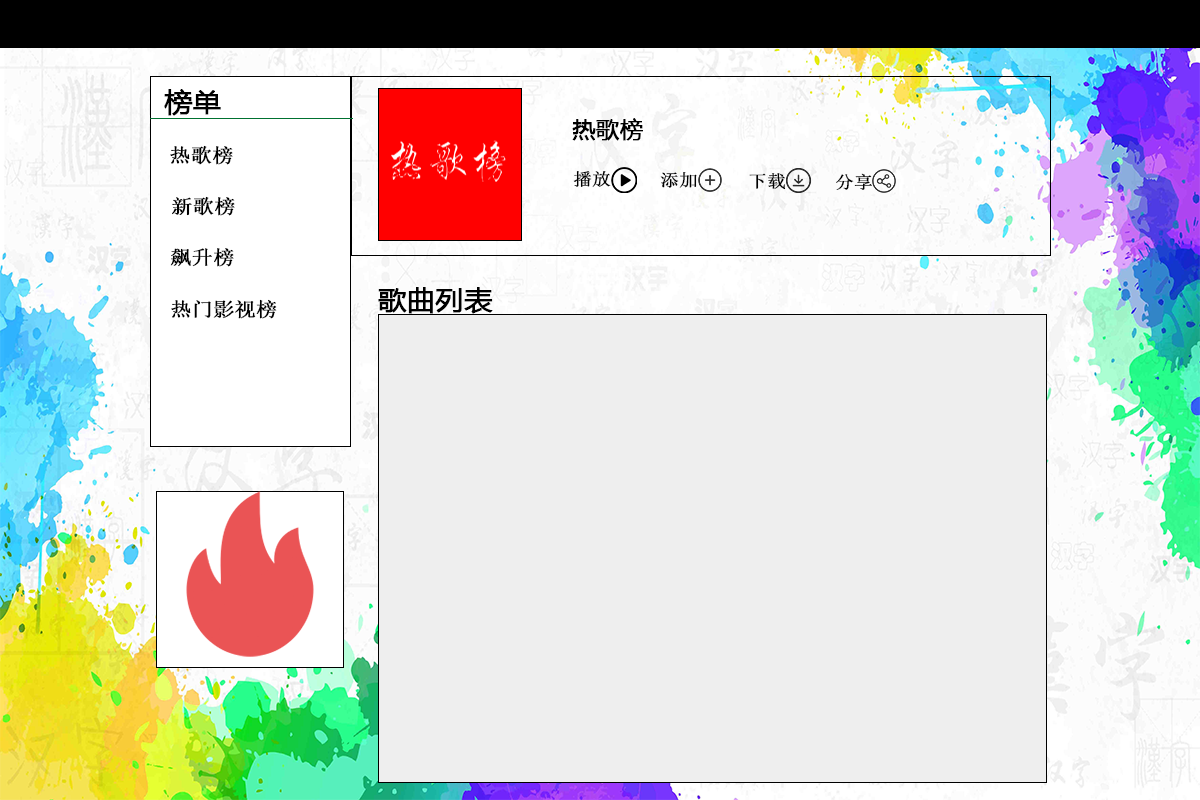
<style>
.page{position:relative;width:1200px;height:800px;background:#eeeeee}
.page>*{position:absolute;margin:0}
.t1{font:25.9px "MicrosoftYaHei";color:#000000;font-weight:bold;scale:1.07 1}
.t2{font:21.6px "MicrosoftYaHei";color:#000000;font-weight:bold;scale:1.07 1}
.t3{font:19.4px "SimSun";color:#000000;font-weight:bold;scale:1.07 1}
.t4{font:17.3px "SimSun";color:#000000;font-weight:bold;scale:1.07 1}
</style>
<div class="page">
<p class="t1" style="left:164px;top:89px;width:57px;height:27px">榜单</p>
<p class="t2" style="left:572px;top:118px;width:71px;height:23px">热歌榜</p>
<p class="t3" style="left:170px;top:145px;width:63px;height:20px">热歌榜</p>
<p class="t4" style="left:573px;top:171px;width:38px;height:16px">播放</p>
<p class="t4" style="left:660px;top:172px;width:37px;height:16px">添加</p>
<p class="t4" style="left:749px;top:173px;width:37px;height:17px">下载</p>
<p class="t4" style="left:836px;top:173px;width:36px;height:17px">分享</p>
<p class="t3" style="left:172px;top:196px;width:63px;height:20px">新歌榜</p>
<p class="t3" style="left:170px;top:248px;width:64px;height:19px">飙升榜</p>
<p class="t1" style="left:378px;top:287px;width:115px;height:27px">歌曲列表</p>
<p class="t3" style="left:171px;top:299px;width:106px;height:20px">热门影视榜</p>
</div>
